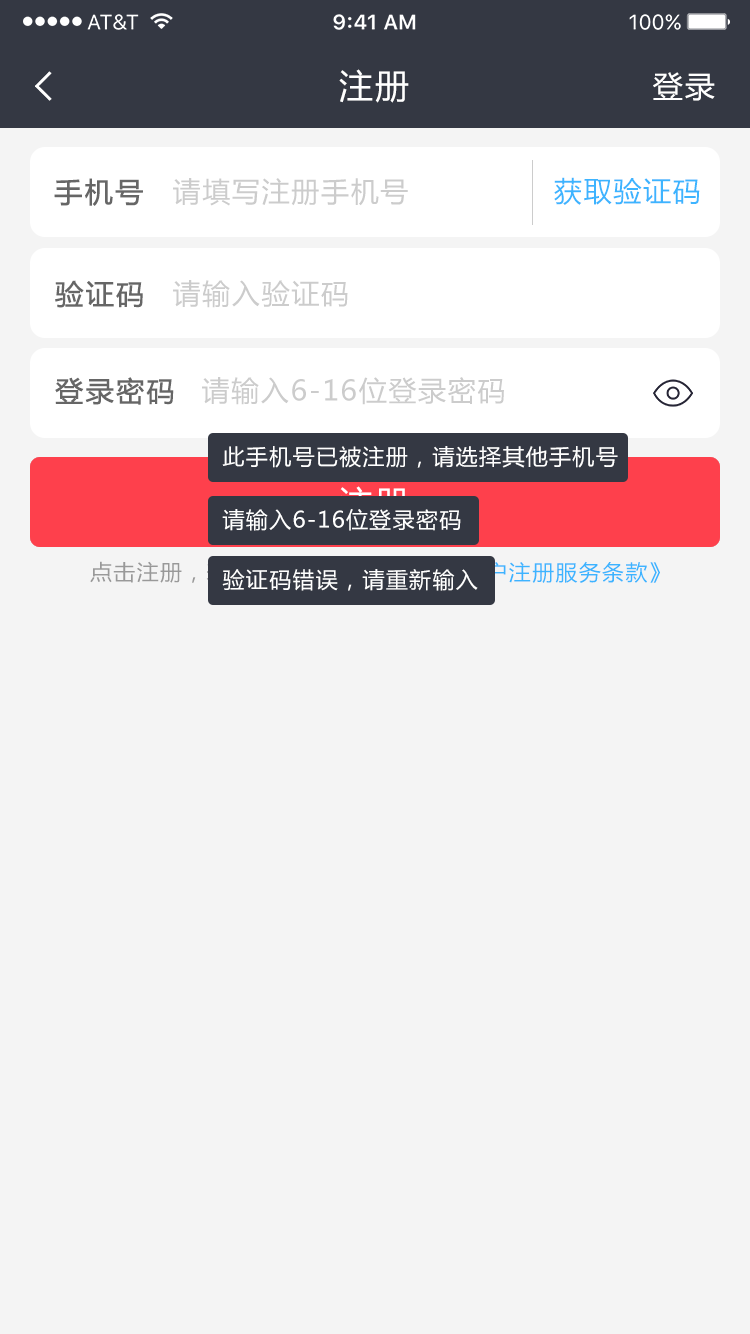
<style>
.page{position:relative;width:750px;height:1334px;background:#f4f4f4}
.page>*{position:absolute;margin:0}
.t1{font:34px "MicrosoftYaHei";letter-spacing:0.06em;color:#ffffff}
.t2{font:30px "MicrosoftYaHei";letter-spacing:0.06em;color:#ffffff}
.t3{font:28px "MicrosoftYaHei";letter-spacing:0.06em;color:#666666;font-weight:bold}
.t4{font:28px "MicrosoftYaHei";letter-spacing:0.06em;color:#cccccc}
.t5{font:28px "MicrosoftYaHei";letter-spacing:0.06em;color:#3db4ff}
.t6{font:22px "MicrosoftYaHei";letter-spacing:0.06em;color:#ffffff}
.t7{font:21.6px "MicrosoftYaHei";letter-spacing:0.06em}
</style>
<div class="page">
<p class="t1" style="left:339px;top:69px;width:70px;height:34px">注册</p>
<p class="t2" style="left:653px;top:72px;width:62px;height:29px">登录</p>
<p class="t3" style="left:54px;top:178px;width:89px;height:28px">手机号</p>
<p class="t4" style="left:173px;top:178px;width:235px;height:28px">请填写注册手机号</p>
<p class="t5" style="left:554px;top:177px;width:146px;height:28px">获取验证码</p>
<p class="t3" style="left:55px;top:280px;width:88px;height:28px">验证码</p>
<p class="t4" style="left:173px;top:280px;width:175px;height:28px">请输入验证码</p>
<p class="t3" style="left:55px;top:377px;width:119px;height:28px">登录密码</p>
<p class="t4" style="left:202px;top:377px;width:302px;height:28px">请输入6-16位登录密码</p>
<p class="t6" style="left:222px;top:446px;width:396px;height:22px">此手机号已被注册，请选择其他手机号</p>
<p class="t6" style="left:222px;top:509px;width:239px;height:22px">请输入6-16位登录密码</p>
<p class="t6" style="left:222px;top:569px;width:256px;height:22px">验证码错误，请重新输入</p>
<p class="t7" style="left:309px;top:561px;width:351px;height:22px">《世峰户外商城用户注册服务条款》</p>
</div>
